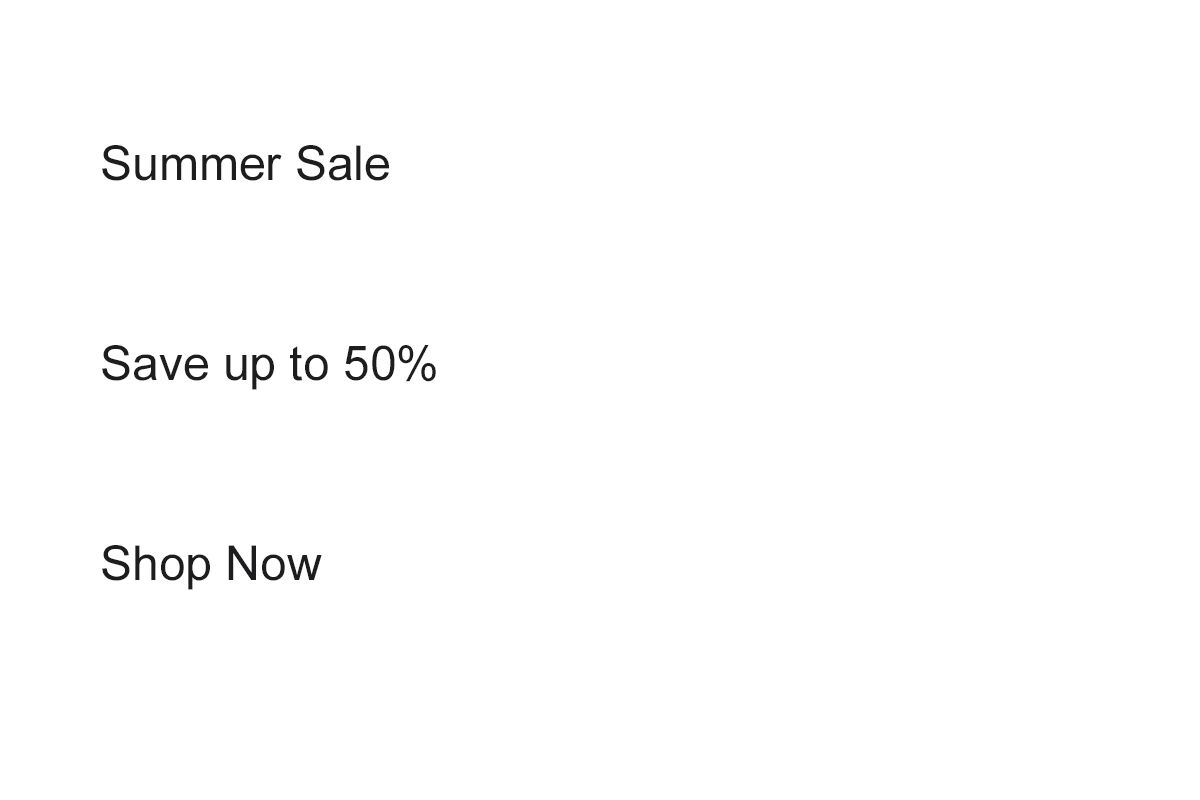
<style>
.page{position:relative;width:1200px;height:800px;background:#ffffff}
.page>*{position:absolute;margin:0}
.t1{font:48px "ArialMT";color:#1d1d1f}
</style>
<div class="page">
<p class="t1" style="left:102px;top:145px;width:287px;height:36px">Summer Sale</p>
<p class="t1" style="left:102px;top:345px;width:334px;height:45px">Save up to 50%</p>
<p class="t1" style="left:102px;top:545px;width:220px;height:45px">Shop Now</p>
</div>
